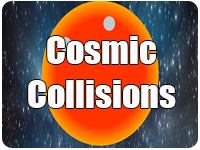
<style>
.page{position:relative;width:200px;height:150px}
.page>*{position:absolute;margin:0}
.t1{font:36px "Impact";color:#fefafa}
</style>
<div class="page">
<p class="t1" style="left:28px;top:36px;width:148px;height:72px;text-align:center">Cosmic<br>Collisions</p>
</div>
